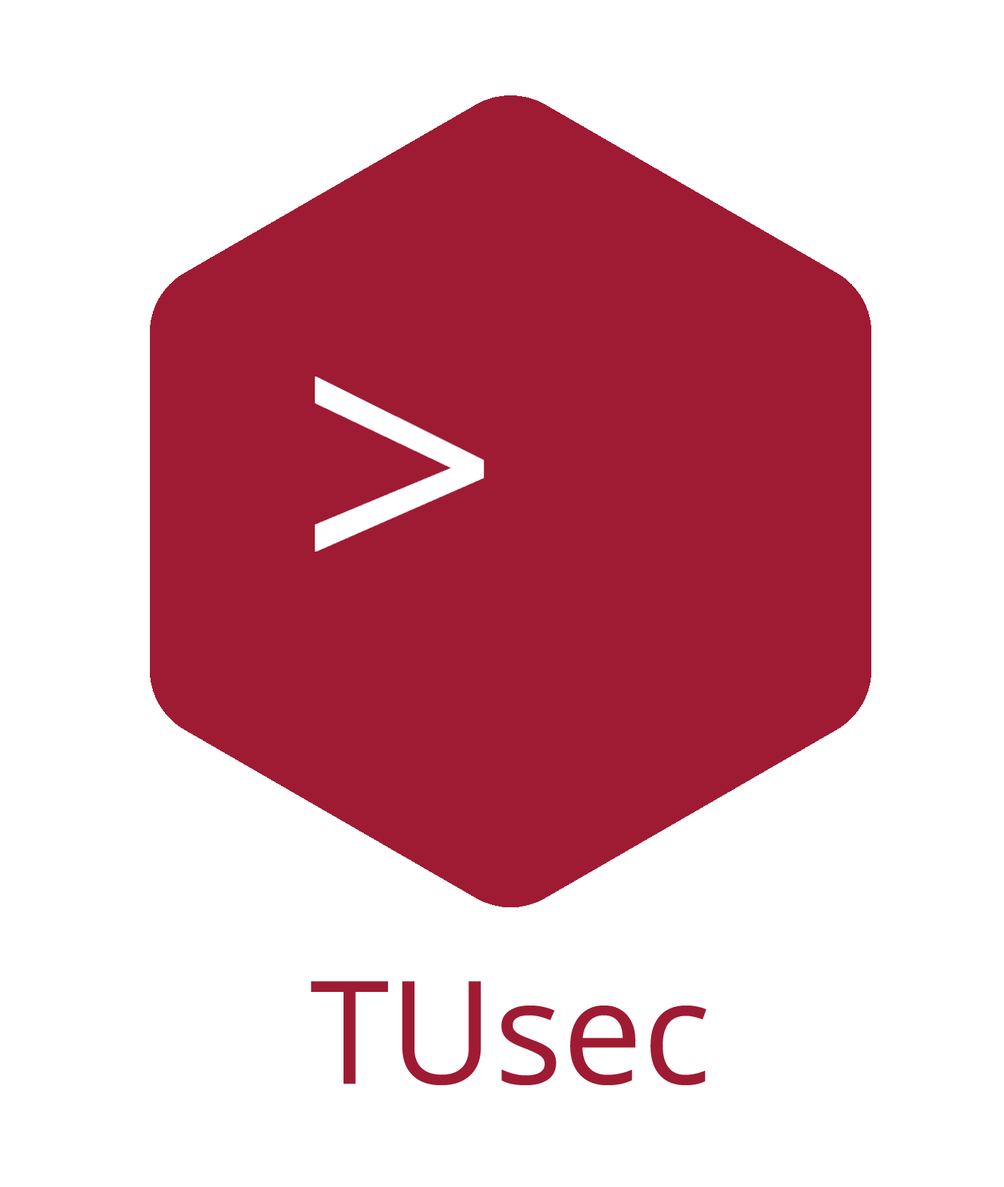
<style>
.page{position:relative;width:1004px;height:1187px;background:#ffffff}
.page>*{position:absolute;margin:0}
.t1{font:143.5px "OpenSans";color:#9f1b33}
</style>
<div class="page">
<p class="t1" style="left:311px;top:981px;width:396px;height:104px">TUsec</p>
</div>
